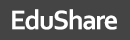
<style>
.page{position:relative;width:130px;height:40px;background:#444444}
.page>*{position:absolute;margin:0}
.t1{font:28.1px "Corbel-Bold";letter-spacing:-0.05em;color:#ffffff}
</style>
<div class="page">
<p class="t1" style="left:12px;top:9px;width:105px;height:21px">EduShare</p>
</div>
